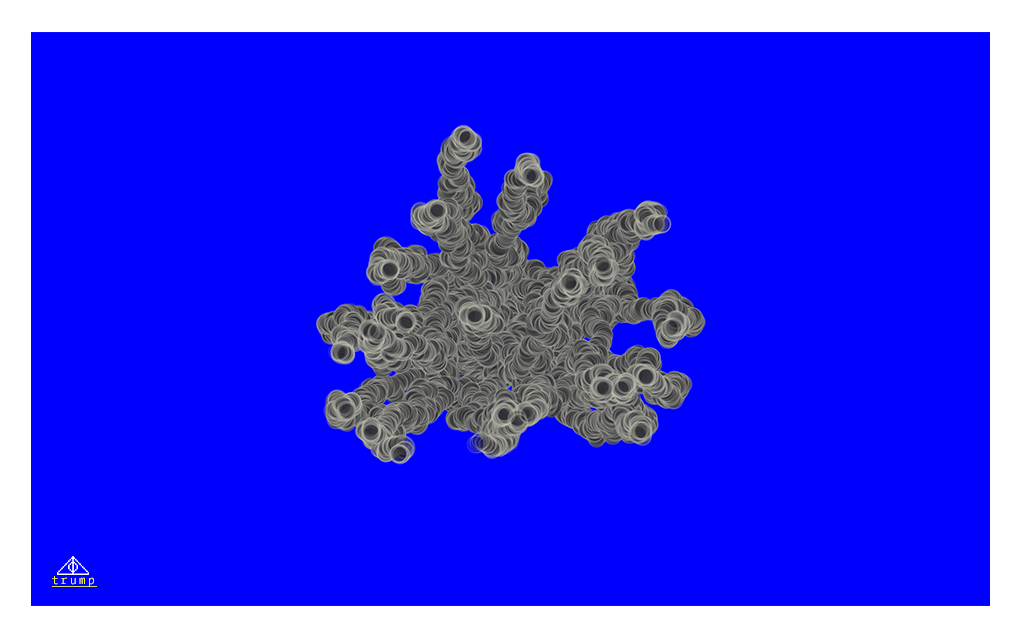
<style>
.page{position:relative;width:1021px;height:638px;background:#0000ff}
.page>*{position:absolute;margin:0}
.t1{font:12px "Consolas";letter-spacing:0.2em;color:#ffff01;text-decoration:underline}
</style>
<div class="page">
<p class="t1" style="left:52px;top:576px;width:45px;height:11px">trump</p>
</div>
